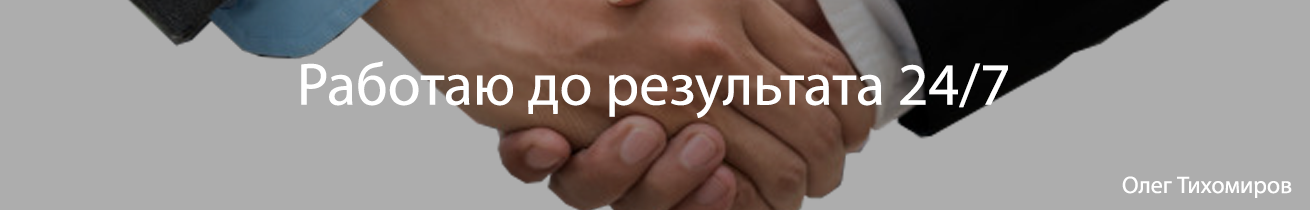
<style>
.page{position:relative;width:1310px;height:210px;background:#adadad}
.page>*{position:absolute;margin:0}
.t1{font:60px "MyriadPro-Regular";color:#ffffff}
.t2{font:24px "MyriadPro-Regular";color:#ffffff}
</style>
<div class="page">
<p class="t1" style="left:301px;top:61px;width:707px;height:57px">Работаю до результата 24/7</p>
<p class="t2" style="left:1122px;top:176px;width:170px;height:22px">Олег Тихомиров</p>
</div>
